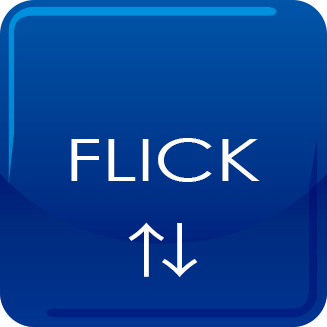
<style>
.page{position:relative;width:327px;height:327px}
.page>*{position:absolute;margin:0}
.t1{font:58.3px/89.6px "CenturyGothic";color:#ffffff;scale:1.3 1}
.t2{font:58.3px/89.6px "KozGoPr6N-Regular";color:#ffffff;scale:1.3 1}
</style>
<div class="page">
<p class="t1" style="left:71px;top:138px;width:189px;height:139px;text-align:center">FLICK<br><span class="t2">⇅</span></p>
</div>
